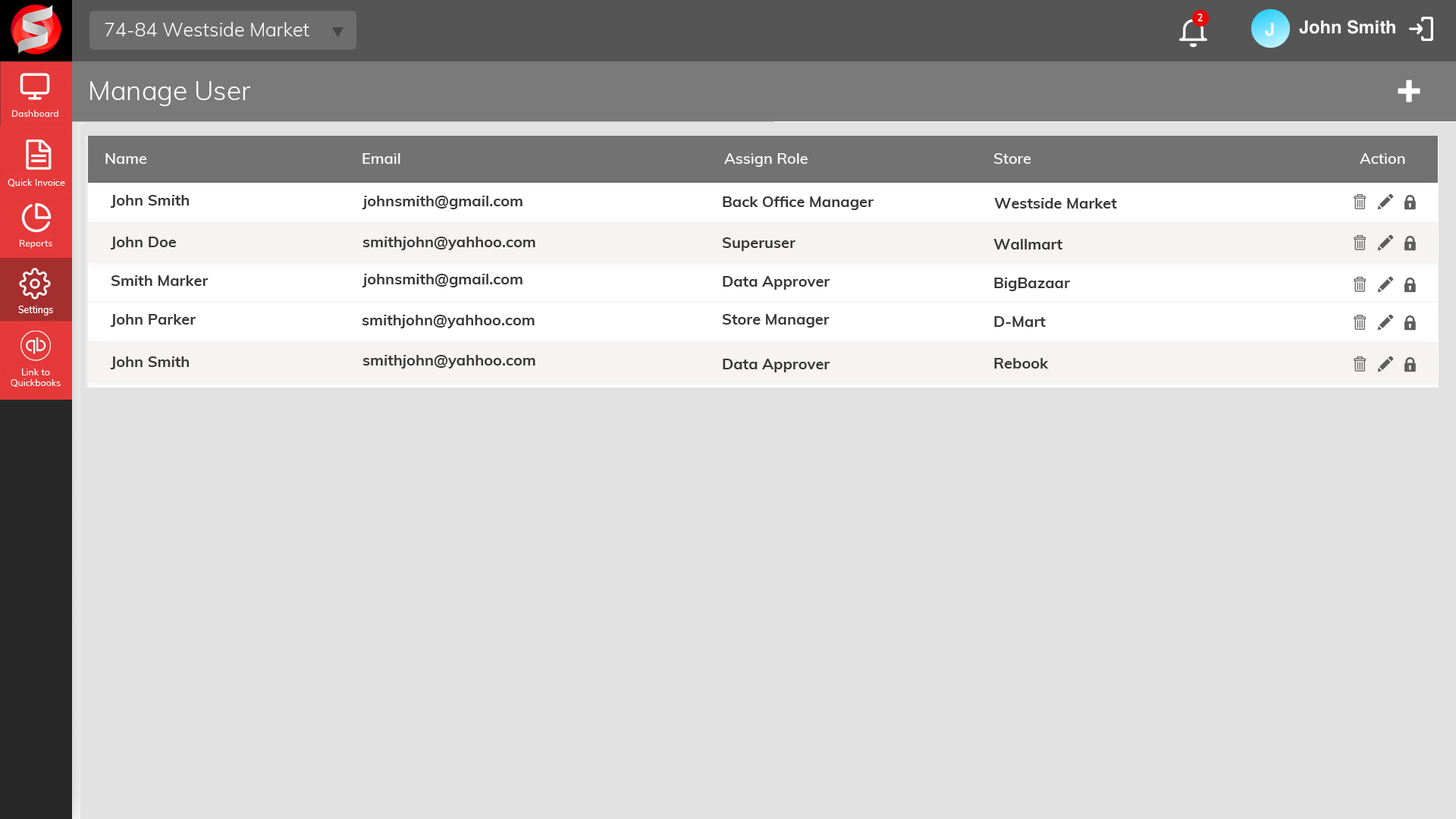
<style>
.page{position:relative;width:1456px;height:819px;background:#e2e2e2}
.page>*{position:absolute;margin:0}
.t1{font:26.5px "Muli-Light";color:#ffffff}
.t2{font:15.2px "Muli-SemiBold";color:#ffffff}
.t3{font:15.2px "Muli-Bold";color:#383838}
.t4{font:9.1px "Muli-SemiBold";color:#ffffff}
</style>
<div class="page">
<p class="t1" style="left:90px;top:81px;width:161px;height:25px">Manage User</p>
<p class="t2" style="left:105px;top:153px;width:42px;height:11px">Name</p>
<p class="t2" style="left:362px;top:153px;width:38px;height:11px">Email</p>
<p class="t2" style="left:724px;top:153px;width:84px;height:14px">Assign Role</p>
<p class="t2" style="left:993px;top:153px;width:38px;height:11px">Store</p>
<p class="t2" style="left:1360px;top:153px;width:45px;height:11px">Action</p>
<p class="t3" style="left:111px;top:195px;width:78px;height:13px">John Smith</p>
<p class="t3" style="left:362px;top:196px;width:160px;height:13px">johnsmith@gmail.com</p>
<p class="t3" style="left:723px;top:196px;width:151px;height:14px">Back Office Manager</p>
<p class="t3" style="left:994px;top:198px;width:123px;height:11px">Westside Market</p>
<p class="t3" style="left:111px;top:237px;width:65px;height:12px">John Doe</p>
<p class="t3" style="left:362px;top:237px;width:173px;height:13px">smithjohn@yahhoo.com</p>
<p class="t3" style="left:722px;top:237px;width:73px;height:14px">Superuser</p>
<p class="t3" style="left:993px;top:239px;width:69px;height:10px">Wallmart</p>
<p class="t3" style="left:111px;top:275px;width:98px;height:11px">Smith Marker</p>
<p class="t3" style="left:362px;top:274px;width:160px;height:13px">johnsmith@gmail.com</p>
<p class="t3" style="left:723px;top:276px;width:107px;height:14px">Data Approver</p>
<p class="t3" style="left:994px;top:278px;width:76px;height:13px">BigBazaar</p>
<p class="t4" style="left:18px;top:306px;width:35px;height:9px">Settings</p>
<p class="t3" style="left:111px;top:314px;width:85px;height:13px">John Parker</p>
<p class="t3" style="left:362px;top:315px;width:173px;height:13px">smithjohn@yahhoo.com</p>
<p class="t3" style="left:722px;top:314px;width:108px;height:14px">Store Manager</p>
<p class="t3" style="left:994px;top:316px;width:52px;height:11px">D-Mart</p>
<p class="t3" style="left:111px;top:356px;width:78px;height:13px">John Smith</p>
<p class="t3" style="left:362px;top:355px;width:173px;height:14px">smithjohn@yahhoo.com</p>
<p class="t3" style="left:723px;top:359px;width:107px;height:13px">Data Approver</p>
<p class="t3" style="left:994px;top:358px;width:55px;height:11px">Rebook</p>
</div>
